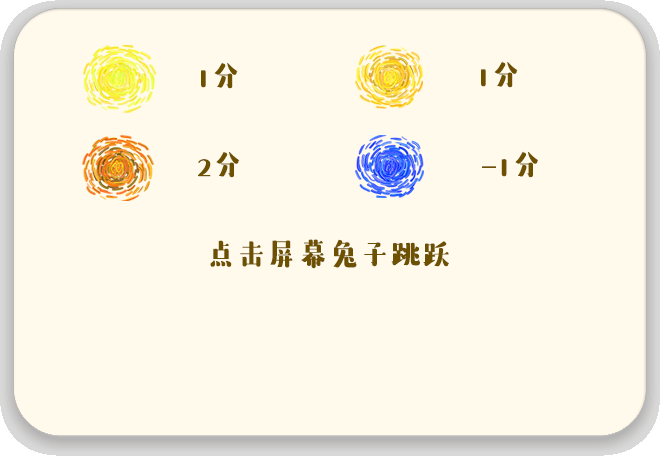
<style>
.page{position:relative;width:660px;height:456px;background:#fffaec}
.page>*{position:absolute;margin:0}
.t1{font:30px "FZQUSJW--GB1-0";color:#6d5000;font-weight:bold}
</style>
<div class="page">
<p class="t1" style="left:201px;top:62px;width:37px;height:27px">1分</p>
<p class="t1" style="left:481px;top:61px;width:37px;height:27px">1分</p>
<p class="t1" style="left:198px;top:151px;width:42px;height:27px">2分</p>
<p class="t1" style="left:482px;top:151px;width:56px;height:27px">-1分</p>
<p class="t1" style="left:210px;top:239px;width:239px;height:30px">点击屏幕兔子跳跃</p>
</div>
